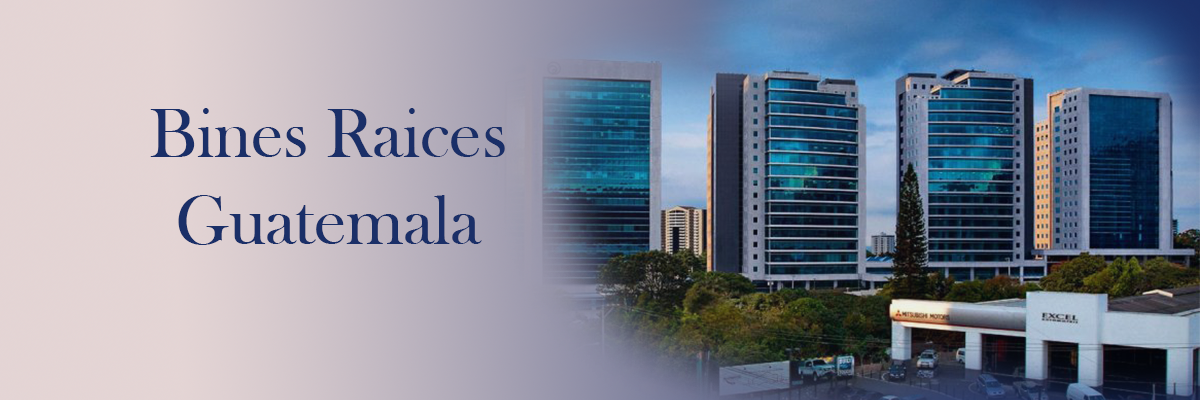
<style>
.page{position:relative;width:1200px;height:400px}
.page>*{position:absolute;margin:0}
.t1{font:72px "BaskOldFace";letter-spacing:-0.005em;color:#1a2f68}
</style>
<div class="page">
<p class="t1" style="left:150px;top:108px;width:355px;height:137px;text-align:center">Bines Raices Guatemala</p>
</div>
